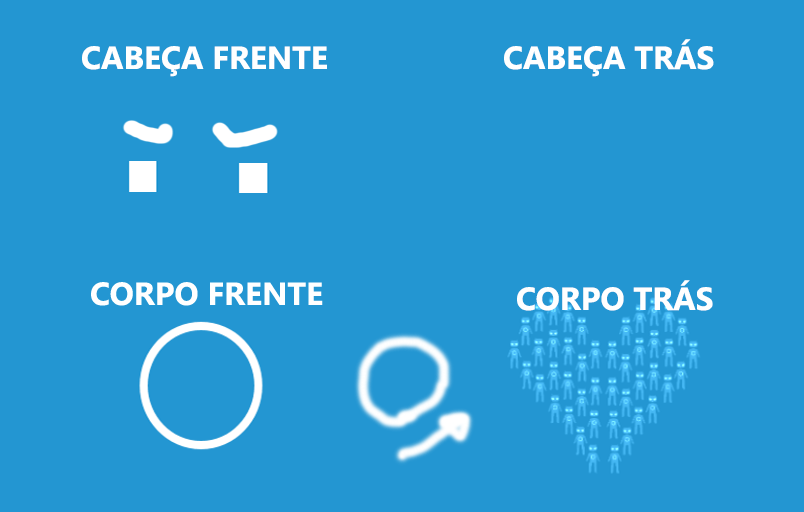
<style>
.page{position:relative;width:804px;height:512px;background:#2396d2}
.page>*{position:absolute;margin:0}
.t1{font:32px "SegoeUI-Bold";color:#ffffff}
</style>
<div class="page">
<p class="t1" style="left:504px;top:39px;width:210px;height:38px">CABEÇA TRÁS</p>
<p class="t1" style="left:82px;top:46px;width:245px;height:31px">CABEÇA FRENTE</p>
<p class="t1" style="left:517px;top:280px;width:196px;height:31px">CORPO TRÁS</p>
</div>
